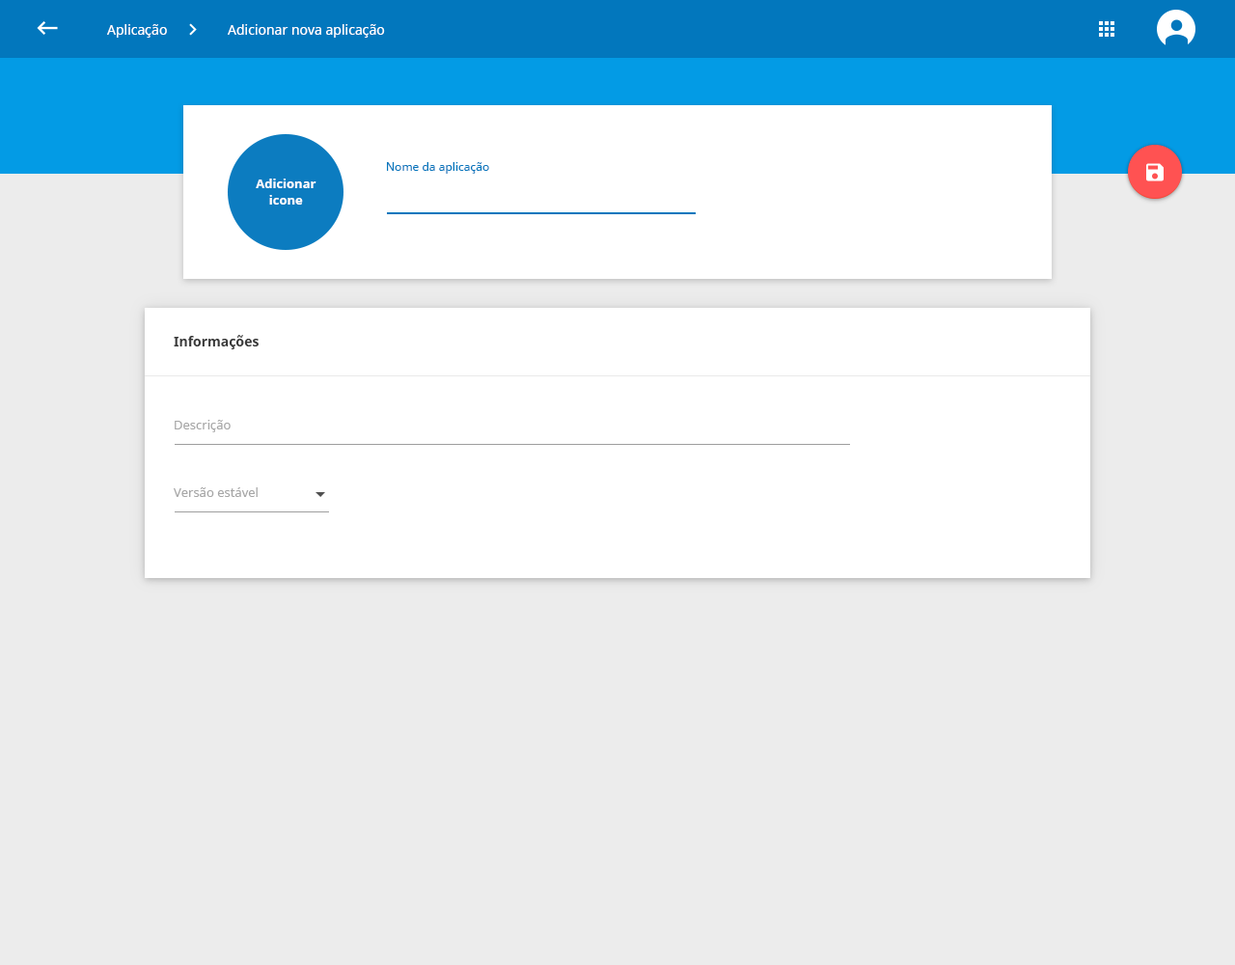
<style>
.page{position:relative;width:1235px;height:965px;background:#ececec}
.page>*{position:absolute;margin:0}
.t1{font:13.5px "NotoSans";color:#ffffff}
.t2{font:11.6px "NotoSans";color:#0277bd}
.t3{font:12.5px "NotoSans-Bold";color:#ffffff}
.t4{font:13.5px "NotoSans-Bold";color:#393939}
.t5{font:12.5px "NotoSans";color:#a7a7a7}
</style>
<div class="page">
<p class="t1" style="left:107px;top:24px;width:60px;height:14px">Aplicação</p>
<p class="t1" style="left:228px;top:24px;width:157px;height:14px">Adicionar nova aplicação</p>
<p class="t2" style="left:387px;top:162px;width:102px;height:12px">Nome da aplicação</p>
<p class="t3" style="left:256px;top:179px;width:61px;height:26px;text-align:center">Adicionar <br>icone</p>
<p class="t4" style="left:174px;top:335px;width:85px;height:14px">Informações</p>
<p class="t5" style="left:175px;top:420px;width:56px;height:12px">Descrição</p>
<p class="t5" style="left:174px;top:487px;width:84px;height:10px">Versão estável</p>
</div>
